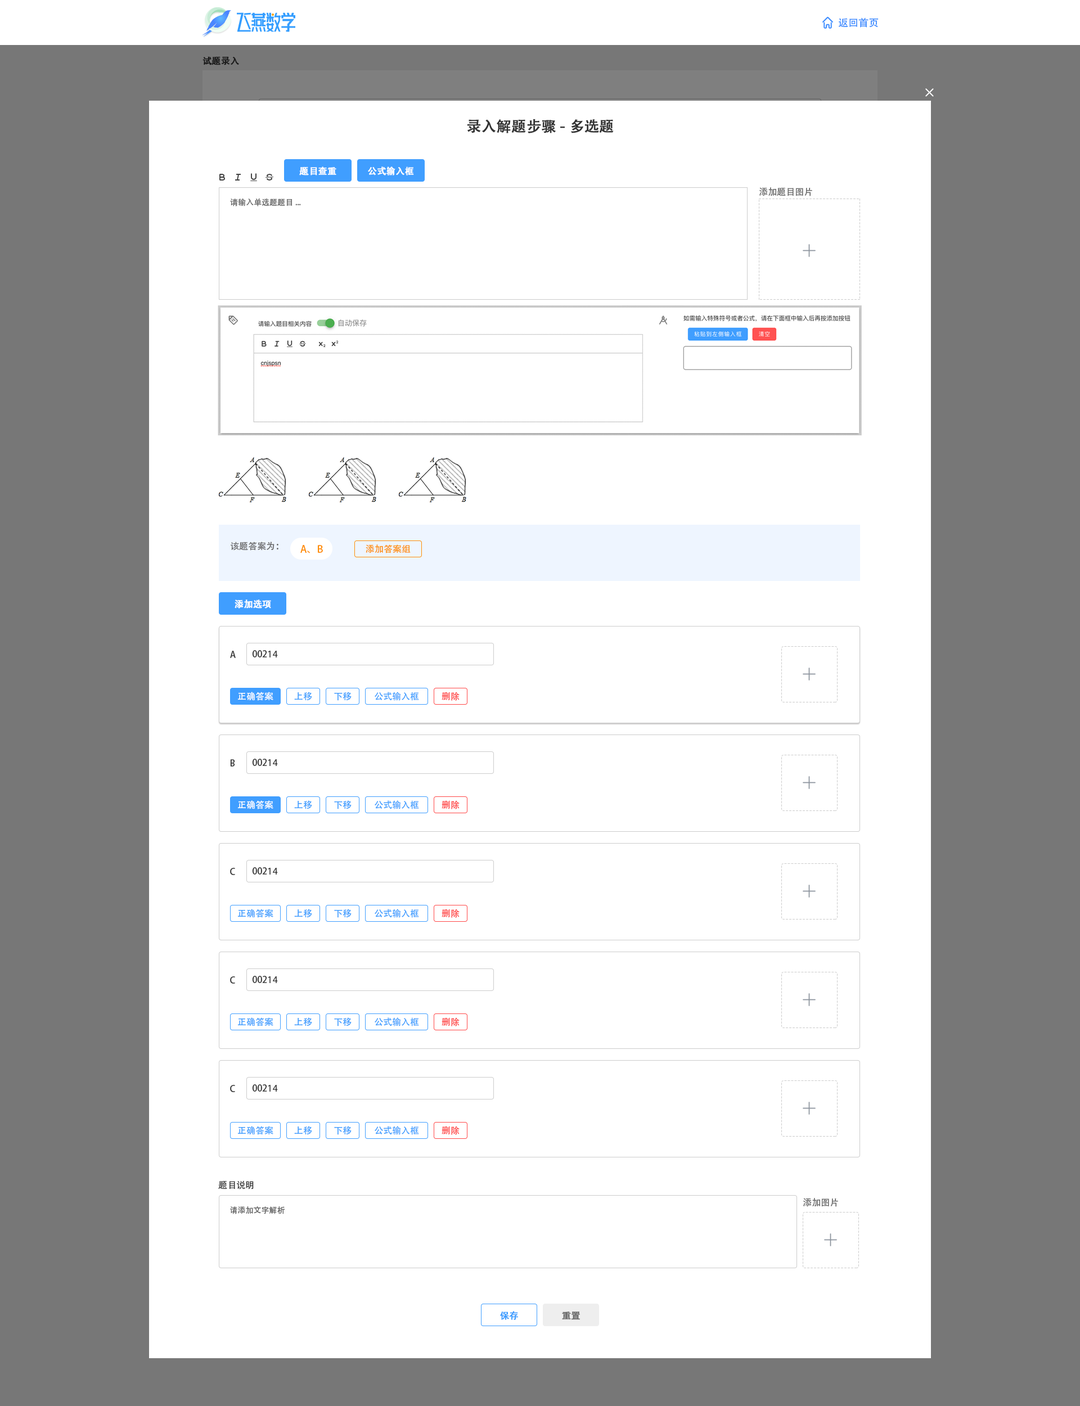
<style>
.page{position:relative;width:1080px;height:1406px;background:#ffffff}
.page>*{position:absolute;margin:0}
.t1{font:10.1px "AdobeHeitiStd-Regular";color:#408eff}
.t2{font:9px "AdobeHeitiStd-Regular";color:#191919;font-weight:bold}
.t3{font:14.6px "AdobeHeitiStd-Regular";color:#333333;font-weight:bold}
.t4{font:9px "AdobeHeitiStd-Regular";color:#ffffff;font-weight:bold}
.t5{font:7.9px "AdobeHeitiStd-Regular";color:#666666}
.t6{font:9px "AdobeHeitiStd-Regular";color:#666666}
.t7{font:10.1px "AdobeHeitiStd-Regular";color:#fe8e05}
.t8{font:9px "AdobeHeitiStd-Regular";color:#fe8e05}
.t9{font:9px "AdobeHeitiStd-Regular";color:#333333}
.t10{font:9px "AdobeHeitiStd-Regular";color:#ffffff}
.t11{font:9px "AdobeHeitiStd-Regular";color:#409eff}
.t12{font:9px "AdobeHeitiStd-Regular";color:#ff4848}
.t13{font:9px "AdobeHeitiStd-Regular";color:#409eff;font-weight:bold}
.t14{font:9px "AdobeHeitiStd-Regular";color:#666666;font-weight:bold}
</style>
<div class="page">
<p class="t1" style="left:838px;top:17px;width:41px;height:11px">返回首页</p>
<p class="t2" style="left:202px;top:56px;width:37px;height:9px">试题录入</p>
<p class="t3" style="left:467px;top:119px;width:147px;height:14px">录入解题步骤-多选题</p>
<p class="t4" style="left:299px;top:166px;width:37px;height:10px">题目查重</p>
<p class="t4" style="left:368px;top:166px;width:46px;height:10px">公式输入框</p>
<p class="t5" style="left:230px;top:198px;width:71px;height:8px">请输入单选题题目...</p>
<p class="t6" style="left:759px;top:187px;width:53px;height:9px">添加题目图片</p>
<p class="t6" style="left:231px;top:542px;width:47px;height:9px">该题答案为：</p>
<p class="t7" style="left:300px;top:545px;width:23px;height:9px">A、B</p>
<p class="t8" style="left:366px;top:544px;width:45px;height:10px">添加答案组</p>
<p class="t4" style="left:235px;top:600px;width:36px;height:9px">添加选项</p>
<p class="t9" style="left:230px;top:651px;width:6px;height:7px">A</p>
<p class="t9" style="left:252px;top:650px;width:26px;height:8px">00214</p>
<p class="t10" style="left:238px;top:692px;width:35px;height:9px">正确答案</p>
<p class="t11" style="left:294px;top:692px;width:18px;height:9px">上移</p>
<p class="t11" style="left:334px;top:692px;width:18px;height:9px">下移</p>
<p class="t11" style="left:375px;top:692px;width:44px;height:9px">公式输入框</p>
<p class="t12" style="left:442px;top:692px;width:18px;height:9px">删除</p>
<p class="t9" style="left:230px;top:759px;width:5px;height:8px">B</p>
<p class="t9" style="left:252px;top:759px;width:26px;height:7px">00214</p>
<p class="t10" style="left:238px;top:800px;width:35px;height:9px">正确答案</p>
<p class="t11" style="left:294px;top:800px;width:18px;height:9px">上移</p>
<p class="t11" style="left:334px;top:800px;width:18px;height:9px">下移</p>
<p class="t11" style="left:375px;top:800px;width:44px;height:9px">公式输入框</p>
<p class="t12" style="left:442px;top:800px;width:18px;height:9px">删除</p>
<p class="t9" style="left:230px;top:868px;width:5px;height:7px">C</p>
<p class="t9" style="left:252px;top:867px;width:26px;height:8px">00214</p>
<p class="t11" style="left:238px;top:909px;width:35px;height:9px">正确答案</p>
<p class="t11" style="left:294px;top:909px;width:18px;height:9px">上移</p>
<p class="t11" style="left:334px;top:909px;width:18px;height:9px">下移</p>
<p class="t11" style="left:375px;top:909px;width:44px;height:9px">公式输入框</p>
<p class="t12" style="left:442px;top:909px;width:18px;height:9px">删除</p>
<p class="t9" style="left:230px;top:976px;width:5px;height:8px">C</p>
<p class="t9" style="left:252px;top:976px;width:26px;height:7px">00214</p>
<p class="t11" style="left:238px;top:1018px;width:35px;height:9px">正确答案</p>
<p class="t11" style="left:294px;top:1018px;width:18px;height:9px">上移</p>
<p class="t11" style="left:334px;top:1018px;width:18px;height:9px">下移</p>
<p class="t11" style="left:375px;top:1018px;width:44px;height:9px">公式输入框</p>
<p class="t12" style="left:442px;top:1018px;width:18px;height:9px">删除</p>
<p class="t9" style="left:230px;top:1085px;width:5px;height:7px">C</p>
<p class="t9" style="left:252px;top:1084px;width:26px;height:8px">00214</p>
<p class="t11" style="left:238px;top:1126px;width:35px;height:9px">正确答案</p>
<p class="t11" style="left:294px;top:1126px;width:18px;height:9px">上移</p>
<p class="t11" style="left:334px;top:1126px;width:18px;height:9px">下移</p>
<p class="t11" style="left:375px;top:1126px;width:44px;height:9px">公式输入框</p>
<p class="t12" style="left:442px;top:1126px;width:18px;height:9px">删除</p>
<p class="t9" style="left:218px;top:1181px;width:36px;height:9px">题目说明</p>
<p class="t6" style="left:803px;top:1198px;width:35px;height:9px">添加图片</p>
<p class="t5" style="left:230px;top:1207px;width:55px;height:7px">请添加文字解析</p>
<p class="t13" style="left:500px;top:1311px;width:18px;height:9px">保存</p>
<p class="t14" style="left:562px;top:1312px;width:18px;height:8px">重置</p>
</div>
